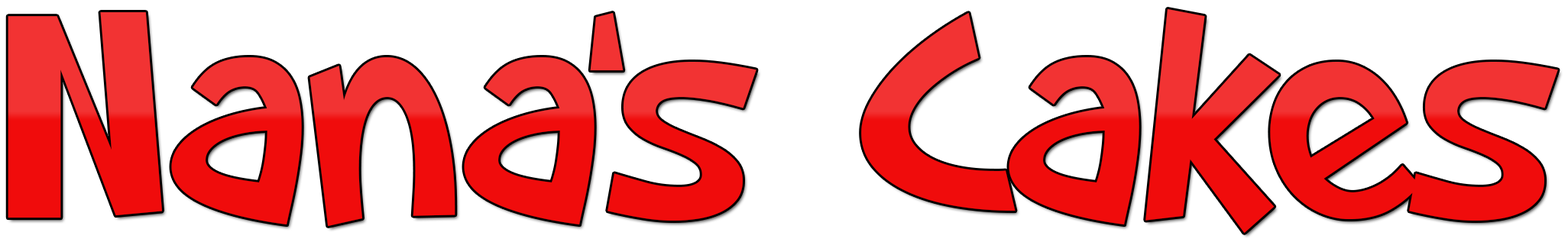
<style>
.page{position:relative;width:1568px;height:242px;background:#ffffff}
.page>*{position:absolute;margin:0}
.t1{font:305.7px "SFSlapstickComic"}
</style>
<div class="page">
<p class="t1" style="left:8px;top:9px;width:1550px;height:224px">Nana’s Cakes</p>
</div>
